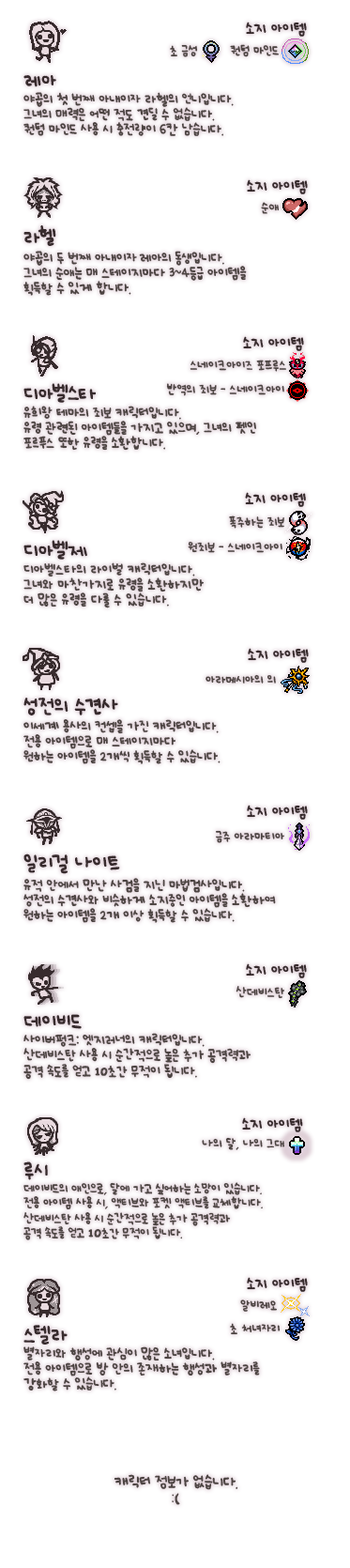
<style>
.page{position:relative;width:350px;height:1568px;background:#ffffff}
.page>*{position:absolute;margin:0}
.t1{font:11.3px "UhBeeSe_hyunBold";color:#372b2d}
.t2{font:11.3px "UhBeeSe_hyunBold";letter-spacing:-0.1em;color:#372b2d}
.t3{font:9.4px "UhBeeSe_hyunBold";color:#4c4442}
.t4{font:9.4px "UhBeeSe_hyunBold";letter-spacing:-0.1em;color:#4c4442}
.t5{font:10.3px/15px "UhBeeSe_hyunBold";letter-spacing:-0.025em;color:#4c4442}
.t6{font:15px/21.6px "UhBeeSe_hyunBold";color:#372b2d}
.t7{font:10.3px/15px "UhBeeSe_hyun";letter-spacing:-0.025em;color:#4c4442}
.t8{font:15px/23.5px "UhBeeSe_hyunBold";letter-spacing:-0.15em;color:#372b2d}
.t9{font:10.3px/15px "UhBeeSe_hyunBold";letter-spacing:-0.1em;color:#4c4442}
.t10{font:15px/21.6px "UhBeeSe_hyunBold";letter-spacing:-0.125em;color:#372b2d}
.t11{font:15px/21.6px "UhBeeSe_hyunBold";letter-spacing:-0.05em;color:#372b2d}
.t12{font:15px/21.6px "UhBeeSe_hyunBold";letter-spacing:-0.1em;color:#372b2d}
.t13{font:10.3px/15px "UhBeeSe_hyunBold";letter-spacing:-0.15em;color:#4c4442}
.t14{font:10.3px/15px "UhBeeSe_hyunBold";color:#4c4442}
.t15{font:10.3px/15px "UhBeeSe_hyunBold";letter-spacing:-0.05em;color:#4c4442}
.t16{font:15px/21.6px "UhBeeSe_hyun";color:#372b2d}
.t17{font:10.3px/12.2px "UhBeeSe_hyunBold";letter-spacing:-0.025em;color:#4c4442}
.t18{font:10.3px/12.2px "UhBeeSe_hyun";letter-spacing:-0.025em;color:#4c4442}
.t19{font:15px/15px "Font_soulsV2_Body-Regular";letter-spacing:-0.025em;color:#4c4442}
.t20{font:9.4px/14.1px "UhBeeSe_hyunBold";letter-spacing:-0.025em;color:#4c4442}
.t21{font:9.4px/16px "UhBeeSe_hyunBold";letter-spacing:-0.025em;color:#4c4442}
.t22{font:9.4px/10.3px "UhBeeSe_hyunBold";letter-spacing:-0.025em;color:#4c4442}
.t23{font:9.4px/10.3px "UhBeeSe_hyun";letter-spacing:-0.025em;color:#4c4442}
.t24{font:9.4px/14.1px "UhBeeSe_hyun";letter-spacing:-0.025em;color:#4c4442}
.t25{font:15px/14.1px "Font_soulsV2_Body-Regular";letter-spacing:-0.025em;color:#4c4442}
.t26{font:15px/21.6px "UhBeeSe_hyunBold";letter-spacing:-0.15em;color:#372b2d}
</style>
<div class="page">
<p class="t1" style="left:246px;top:22px;width:61px;height:15px"><span class="t2">소</span>지 아이템</p>
<p class="t3" style="left:170px;top:44px;width:28px;height:13px">초 금성</p>
<p class="t3" style="left:230px;top:44px;width:49px;height:13px">퀀텀 <span class="t4">마</span>인드</p>
<p class="t5" style="left:23px;top:75px;width:211px;height:61px"><span class="t6">레아<br></span>야<span class="t7">곱</span>의 첫 번째 아내이자 라헬의 언니입니다. <br>그녀의 매력은 어떤 적도 견딜 수 없습니다.<br>퀀텀 마인드 사용 시 충전량이 6칸 남습니다.</p>
<p class="t1" style="left:247px;top:179px;width:61px;height:15px"><span class="t2">소</span>지 아이템</p>
<p class="t3" style="left:261px;top:202px;width:19px;height:12px">순애</p>
<p class="t5" style="left:23px;top:225px;width:224px;height:71px"><span class="t8">라</span><span class="t6">헬<br></span>야<span class="t7">곱</span>의 두 번째 아내이<span class="t9">자 </span>레아의 동생입니다. <br>그녀의 순애는 매 스테이지마다 3~4등급 아이템을<br>획득할 수 있게 합니다.</p>
<p class="t1" style="left:243px;top:336px;width:61px;height:15px"><span class="t2">소</span>지 아이템</p>
<p class="t3" style="left:190px;top:360px;width:96px;height:12px">스네이크아이즈 포프루스</p>
<p class="t5" style="left:23px;top:383px;width:233px;height:68px"><span class="t6">디</span><span class="t10">아</span><span class="t11">벨</span><span class="t12">스</span><span class="t6">타<br></span>유희왕 테마의 죄보 캐릭터입니다.<br>유령 관련된 아이템들을 가지고 있으며, 그녀의 펫인<br>포르푸스 또한 유령을 <span class="t13">소</span>환합니다.</p>
<p class="t3" style="left:166px;top:383px;width:118px;height:13px">반역의 죄보 - 스네이크아이</p>
<p class="t1" style="left:245px;top:492px;width:61px;height:15px"><span class="t2">소</span>지 아이템</p>
<p class="t3" style="left:229px;top:515px;width:55px;height:14px">폭주하는 죄보</p>
<p class="t14" style="left:23px;top:540px;width:181px;height:68px"><span class="t6">디</span><span class="t10">아</span><span class="t11">벨</span><span class="t12">제<br></span>디아벨스타의 라이벌 캐릭터입니다.<br>그녀와 마찬가지로 유령을 <span class="t15">소환하</span>지만<br>더 많은 유령을 다룰 수 있습니다.</p>
<p class="t3" style="left:188px;top:542px;width:95px;height:11px">원죄보 - 스네이크아이</p>
<p class="t1" style="left:248px;top:648px;width:61px;height:15px"><span class="t2">소</span>지 아이템</p>
<p class="t3" style="left:206px;top:674px;width:70px;height:10px">아라메시아의 의</p>
<p class="t5" style="left:23px;top:698px;width:198px;height:66px"><span class="t6">성전의 </span><span class="t12">수</span><span class="t6">견사<br></span>이세계 용사의 컨셉을 가진 캐릭터입니다.<br>전용 아이템으로 매 스테이지마다<br>원하는 아이템을 2개씩 획득할 수 있습니다.</p>
<p class="t1" style="left:247px;top:805px;width:61px;height:15px"><span class="t2">소</span>지 아이템</p>
<p class="t3" style="left:216px;top:830px;width:68px;height:13px">금주 아라마티아</p>
<p class="t5" style="left:23px;top:853px;width:253px;height:70px"><span class="t6">일</span><span class="t12">리</span><span class="t16">걸</span><span class="t6"> 나이트 <br></span>유적 안에서 만난 사검을 지닌 마법검사입니다.<br>성전의 수견사와 비슷하게 소지중인 아이템을 소환하여 <br>원하는 아이템을 2개 이상 획득할 수 있습니다.</p>
<p class="t1" style="left:246px;top:963px;width:61px;height:15px"><span class="t2">소</span>지 아이템</p>
<p class="t3" style="left:236px;top:986px;width:48px;height:13px">산데비스탄</p>
<p class="t17" style="left:23px;top:1014px;width:229px;height:66px"><span class="t6">데이비드<br></span><span class="t5">사이버펑크: 엣지러너의 캐릭터입니다.<br></span>산데비스탄 사용 시 순간적으로 높은 추가 <span class="t18">공격력과<br></span><span class="t7">공격</span><span class="t5"> 속도를 얻고 </span><span class="t19">10</span><span class="t5">초간 무적이 됩니다.</span></p>
<p class="t1" style="left:242px;top:1117px;width:61px;height:15px"><span class="t2">소</span>지 아이템</p>
<p class="t3" style="left:202px;top:1137px;width:83px;height:13px">나의 달, 나의 그대</p>
<p class="t20" style="left:23px;top:1161px;width:240px;height:79px"><span class="t6">루시<br></span>데이비드의 애인으로, 달에 가고 싶어하는 소망이 있습니다.<br><span class="t21">전용 아이템 사용 시, 액티브와 포켓 액티브를 교체합니다.<br></span><span class="t22">산데비스탄 사용 시 순간적으로 높은 추가 </span><span class="t23">공격력과<br></span><span class="t24">공격</span> 속도를 얻고 <span class="t25">10</span>초간 무적이 됩니다.</p>
<p class="t1" style="left:247px;top:1277px;width:61px;height:15px"><span class="t2">소</span>지 아이템</p>
<p class="t3" style="left:240px;top:1299px;width:37px;height:13px">알비레오</p>
<p class="t5" style="left:23px;top:1325px;width:237px;height:66px"><span class="t26">스</span><span class="t6">텔라<br></span>별자리와 행성에 관심이 많은 소녀입니다. <br>전용 아이템으로 방 안의 존재하는 행성과 별자리를<br>강화할 수 있습니다.</p>
<p class="t3" style="left:230px;top:1323px;width:51px;height:12px">초 처녀<span class="t4">자</span>리</p>
</div>
